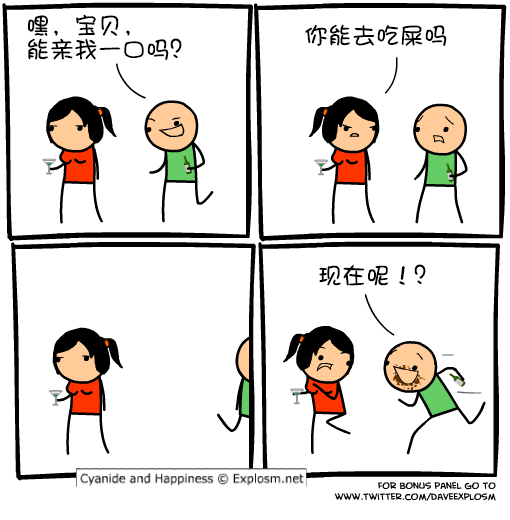
<style>
.page{position:relative;width:510px;height:520px;background:#ffffff}
.page>*{position:absolute;margin:0}
.t1{font:24px/24px "DFShaoNvW5";color:#000000}
.t2{font:24px "DFShaoNvW5";color:#000000}
</style>
<div class="page">
<p class="t1" style="left:28px;top:14px;width:154px;height:46px">嘿，宝贝，<br>能亲我一口吗？</p>
<p class="t2" style="left:305px;top:24px;width:142px;height:22px">你能去吃屎吗</p>
<p class="t2" style="left:319px;top:264px;width:107px;height:22px">现在呢！？</p>
</div>
